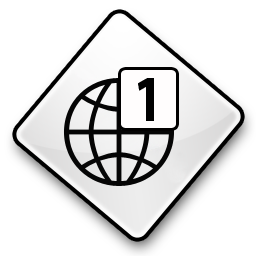
<style>
.page{position:relative;width:256px;height:256px;background:#ffffff}
.page>*{position:absolute;margin:0}
.t1{font:66px "MyriadPro-Bold";letter-spacing:0.005em;color:#010101;scale:0.82 1}
</style>
<div class="page">
<p class="t1" style="left:138px;top:78px;width:16px;height:43px">1</p>
</div>
